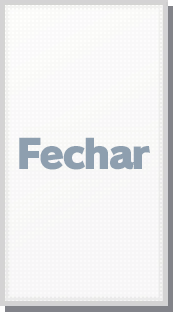
<style>
.page{position:relative;width:174px;height:312px;background:#f7f6f7}
.page>*{position:absolute;margin:0}
.t1{font:40px "RodinPro-UB";letter-spacing:-0.059em;color:#8e9faf}
</style>
<div class="page">
<p class="t1" style="left:19px;top:137px;width:131px;height:33px">Fechar</p>
</div>
